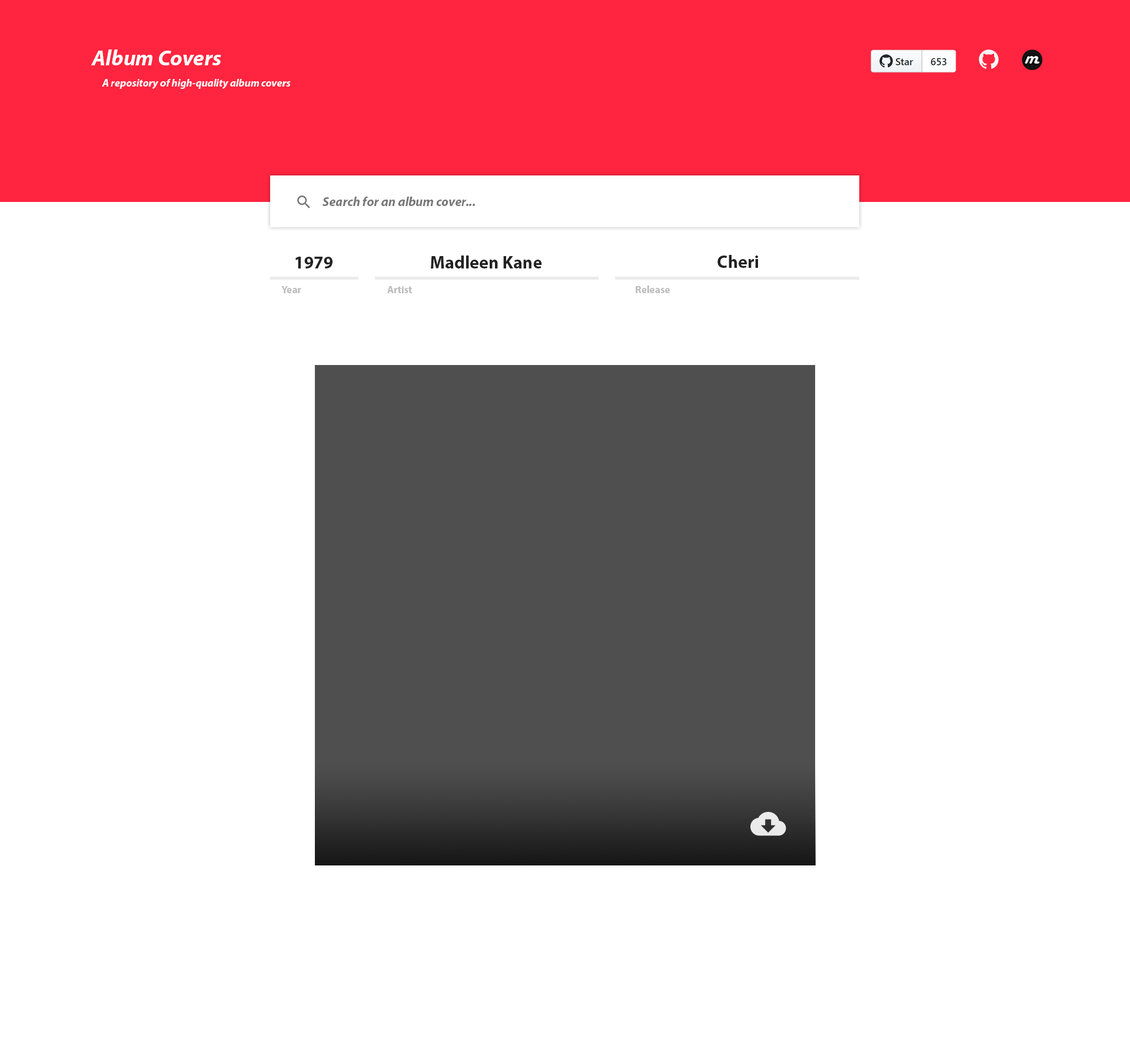
<style>
.page{position:relative;width:1130px;height:1055px;background:#ffffff}
.page>*{position:absolute;margin:0}
.t1{font:21.8px "MyriadPro-BoldIt";color:#ffffff}
.t2{font:10.6px "MyriadPro-BoldIt";color:#ffffff}
.t3{font:12.9px "MyriadPro-BoldIt";color:#777777}
.t4{font:17.7px "MyriadPro-Bold";color:#222222}
.t5{font:10.2px "MyriadPro-Bold";color:#bcbcbc}
</style>
<div class="page">
<p class="t1" style="left:91px;top:49px;width:130px;height:16px">Album Covers</p>
<p class="t2" style="left:102px;top:79px;width:189px;height:10px">A repository of high-quality album covers</p>
<p class="t3" style="left:323px;top:197px;width:152px;height:9px">Search for an album cover...</p>
<p class="t4" style="left:296px;top:257px;width:37px;height:11px">1979</p>
<p class="t4" style="left:431px;top:255px;width:111px;height:13px">Madleen Kane</p>
<p class="t4" style="left:718px;top:255px;width:40px;height:13px">Cheri</p>
<p class="t5" style="left:281px;top:286px;width:20px;height:7px">Year</p>
<p class="t5" style="left:387px;top:286px;width:25px;height:7px">Artist</p>
<p class="t5" style="left:636px;top:286px;width:34px;height:7px">Release</p>
</div>
